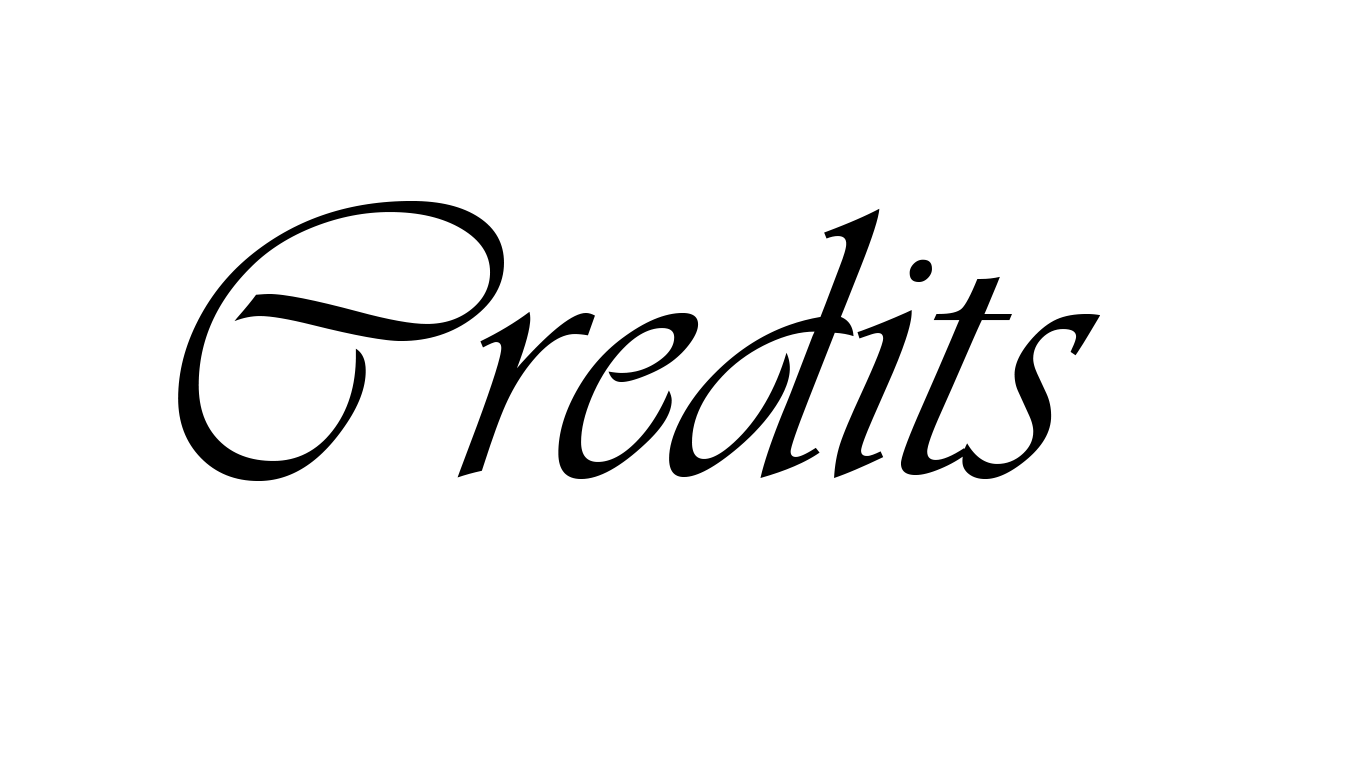
<style>
.page{position:relative;width:1366px;height:768px;background:#ffffff}
.page>*{position:absolute;margin:0}
.t1{font:400px "Vivaldii";color:#000000}
</style>
<div class="page">
<p class="t1" style="left:178px;top:201px;width:922px;height:280px">Credits</p>
</div>
